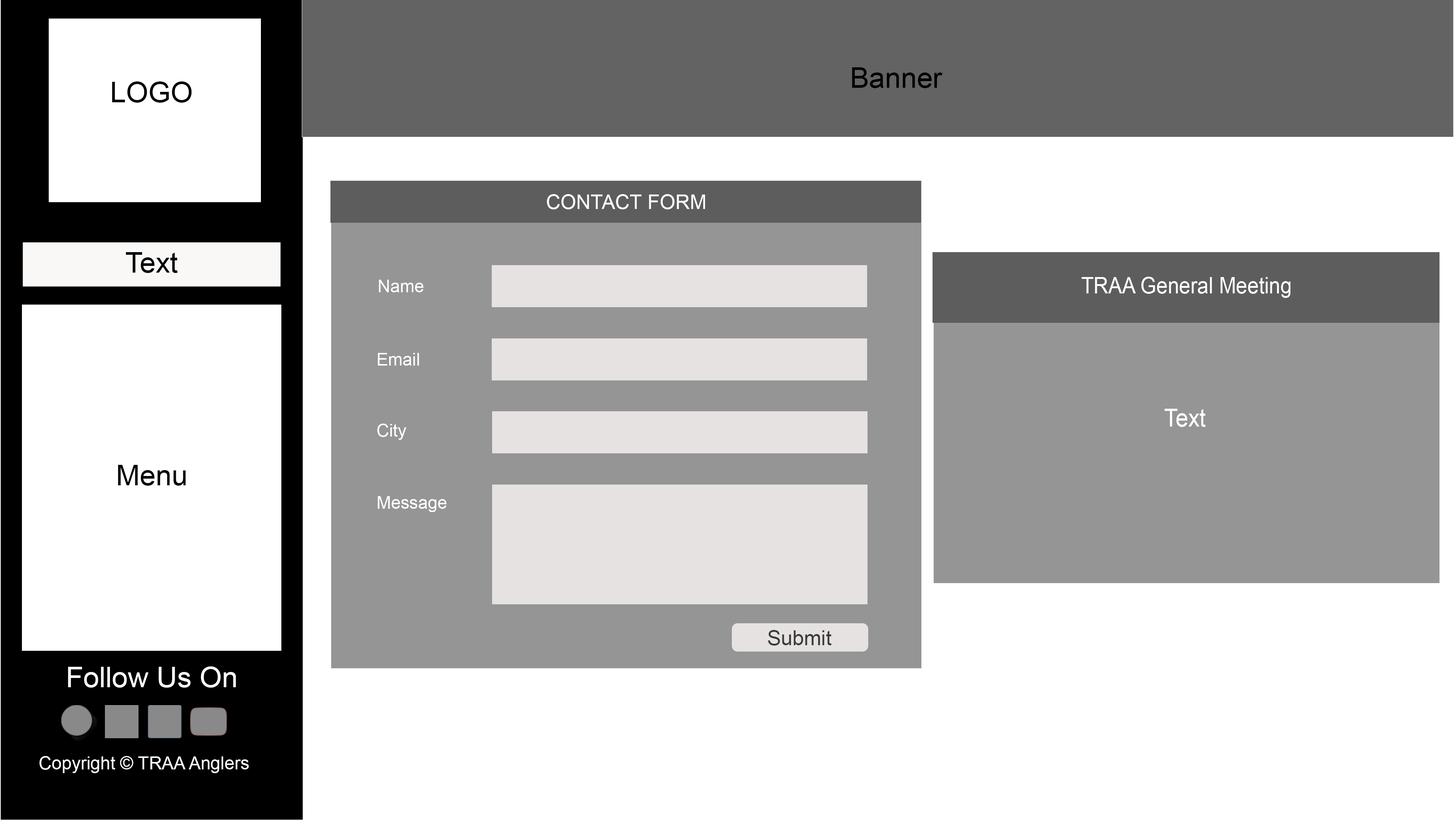
<style>
.page{position:relative;width:1454px;height:820px;background:#ffffff}
.page>*{position:absolute;margin:0}
.t1{font:28.7px "ArialMT";color:#000000}
.t2{font:20.2px "ArialMT";color:#ffffff}
.t3{font:17.3px "ArialMT";color:#ffffff}
.t4{font:22.5px "ArialMT";color:#ffffff;scale:0.91 1}
.t5{font:25px "ArialMT";color:#ffffff;scale:0.91 1}
.t6{font:20.7px "ArialMT";color:#3a3a3a}
.t7{font:28.7px "ArialMT";color:#ffffff}
.t8{font:17.9px "ArialMT";color:#ffffff}
</style>
<div class="page">
<p class="t1" style="left:852px;top:67px;width:91px;height:21px">Banner</p>
<p class="t1" style="left:112px;top:81px;width:80px;height:22px">LOGO</p>
<p class="t2" style="left:547px;top:194px;width:158px;height:15px">CONTACT FORM</p>
<p class="t1" style="left:126px;top:252px;width:52px;height:21px">Text</p>
<p class="t3" style="left:379px;top:280px;width:45px;height:12px">Name</p>
<p class="t4" style="left:1082px;top:277px;width:209px;height:21px">TRAA General Meeting</p>
<p class="t3" style="left:378px;top:353px;width:41px;height:12px">Email</p>
<p class="t5" style="left:1165px;top:409px;width:41px;height:18px">Text</p>
<p class="t3" style="left:377px;top:423px;width:30px;height:17px">City</p>
<p class="t1" style="left:118px;top:465px;width:68px;height:21px">Menu</p>
<p class="t3" style="left:378px;top:496px;width:69px;height:16px">Message</p>
<p class="t6" style="left:768px;top:630px;width:64px;height:15px">Submit</p>
<p class="t7" style="left:68px;top:666px;width:168px;height:21px">Follow Us On</p>
<p class="t8" style="left:39px;top:756px;width:210px;height:17px">Copyright © TRAA Anglers</p>
</div>
